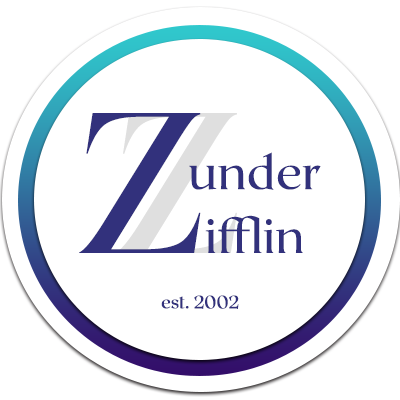
<style>
.page{position:relative;width:400px;height:400px;background:#ffffff}
.page>*{position:absolute;margin:0}
.t1{font:199px "ø";color:#32317c;font-weight:bold}
.t2{font:47.5px/63.7px "ø";color:#32317c;font-weight:bold}
.t3{font:17.4px "ø";color:#32317c;font-weight:bold}
</style>
<div class="page">
<p class="t1" style="left:79px;top:113px;width:122px;height:140px">Z</p>
<p class="t2" style="left:189px;top:152px;width:132px;height:101px;text-align:center">under<br>ifflin</p>
<p class="t3" style="left:161px;top:295px;width:78px;height:14px">est. 2002</p>
</div>
